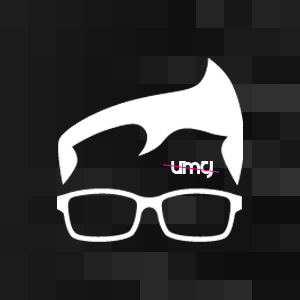
<style>
.page{position:relative;width:300px;height:300px}
.page>*{position:absolute;margin:0}
.t1{font:18px "Velocity";color:#ffffff}
</style>
<div class="page">
<p class="t1" style="left:171px;top:161px;width:42px;height:17px">umg</p>
</div>
